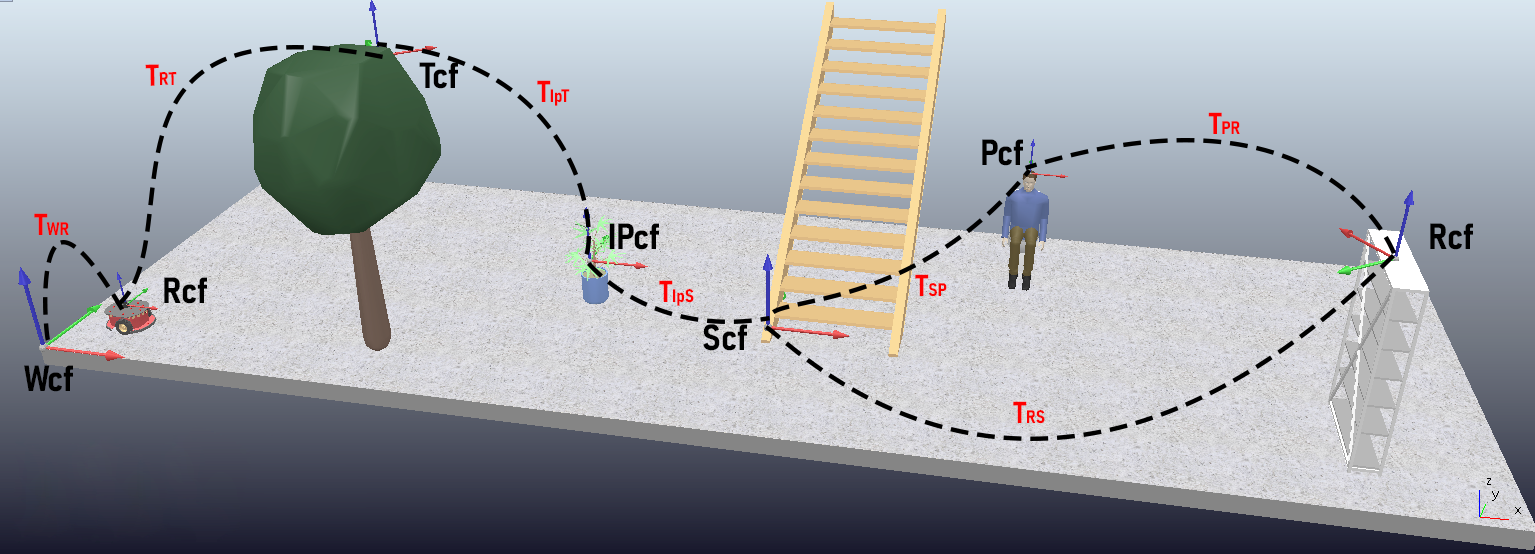
<style>
.page{position:relative;width:1535px;height:554px}
.page>*{position:absolute;margin:0}
.t1{font:18px "Bahnschrift-BoldSemiCondensed";color:#ff0000}
.t2{font:30px "Bahnschrift-BoldSemiCondensed";color:#ff0000}
.t3{font:36px "Bahnschrift-BoldSemiCondensed";color:#000000}
</style>
<div class="page">
<p class="t1" style="left:145px;top:64px;width:32px;height:22px;rotate:-1deg"><span class="t2">T</span>RT</p>
<p class="t3" style="left:419px;top:62px;width:39px;height:27px">Tcf</p>
<p class="t1" style="left:537px;top:80px;width:33px;height:26px"><span class="t2">T</span>IpT</p>
<p class="t1" style="left:1208px;top:112px;width:32px;height:22px"><span class="t2">T</span>PR</p>
<p class="t3" style="left:982px;top:139px;width:41px;height:27px">Pcf</p>
<p class="t1" style="left:34px;top:213px;width:35px;height:22px"><span class="t2">T</span>WR</p>
<p class="t3" style="left:609px;top:223px;width:50px;height:27px">IPcf</p>
<p class="t3" style="left:1430px;top:223px;width:43px;height:27px">Rcf</p>
<p class="t3" style="left:164px;top:277px;width:43px;height:27px">Rcf</p>
<p class="t1" style="left:659px;top:280px;width:35px;height:26px"><span class="t2">T</span>IpS</p>
<p class="t1" style="left:915px;top:274px;width:32px;height:23px"><span class="t2">T</span>SP</p>
<p class="t3" style="left:703px;top:324px;width:44px;height:27px">Scf</p>
<p class="t3" style="left:24px;top:365px;width:49px;height:27px">Wcf</p>
<p class="t1" style="left:1013px;top:401px;width:32px;height:23px"><span class="t2">T</span>RS</p>
</div>
